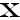
<style>
.page{position:relative;width:20px;height:20px;background:#ffffff}
.page>*{position:absolute;margin:0}
.t1{font:21.5px "EngraversMT";color:#030000}
</style>
<div class="page">
<p class="t1" style="left:0px;top:3px;width:20px;height:14px">x</p>
</div>
